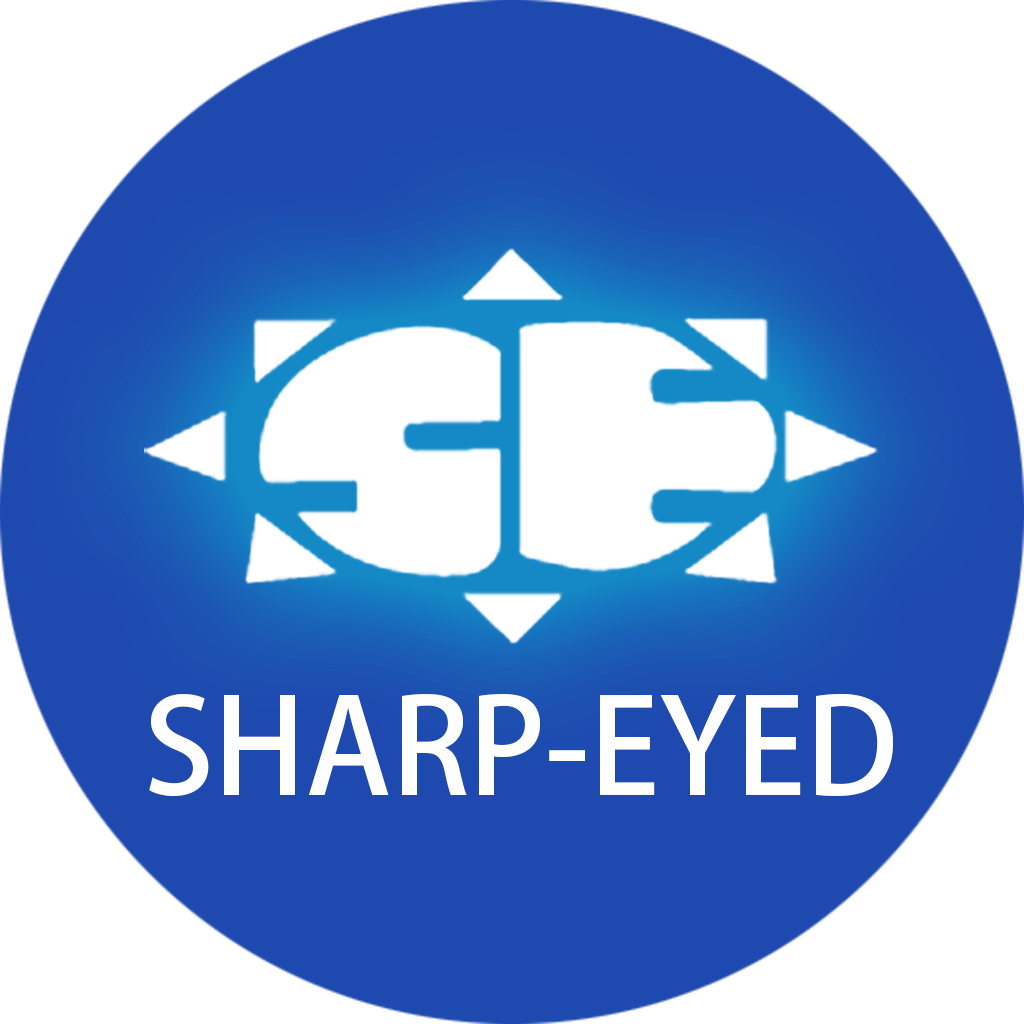
<style>
.page{position:relative;width:1024px;height:1024px;background:#ffffff}
.page>*{position:absolute;margin:0}
.t1{font:130px "AdobeFanHeitiStd-Bold";color:#ffffff}
</style>
<div class="page">
<p class="t1" style="left:149px;top:693px;width:744px;height:103px">SHARP-EYED</p>
</div>
